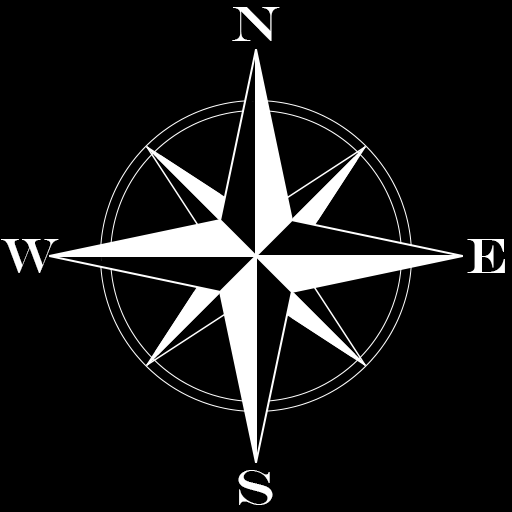
<style>
.page{position:relative;width:512px;height:512px;background:#000000}
.page>*{position:absolute;margin:0}
.t1{font:50px "EngraversMT";color:#ffffff}
</style>
<div class="page">
<p class="t1" style="left:232px;top:7px;width:48px;height:34px">N</p>
<p class="t1" style="left:1px;top:239px;width:58px;height:34px">W</p>
<p class="t1" style="left:467px;top:239px;width:38px;height:34px">E</p>
<p class="t1" style="left:238px;top:470px;width:35px;height:35px">S</p>
</div>
